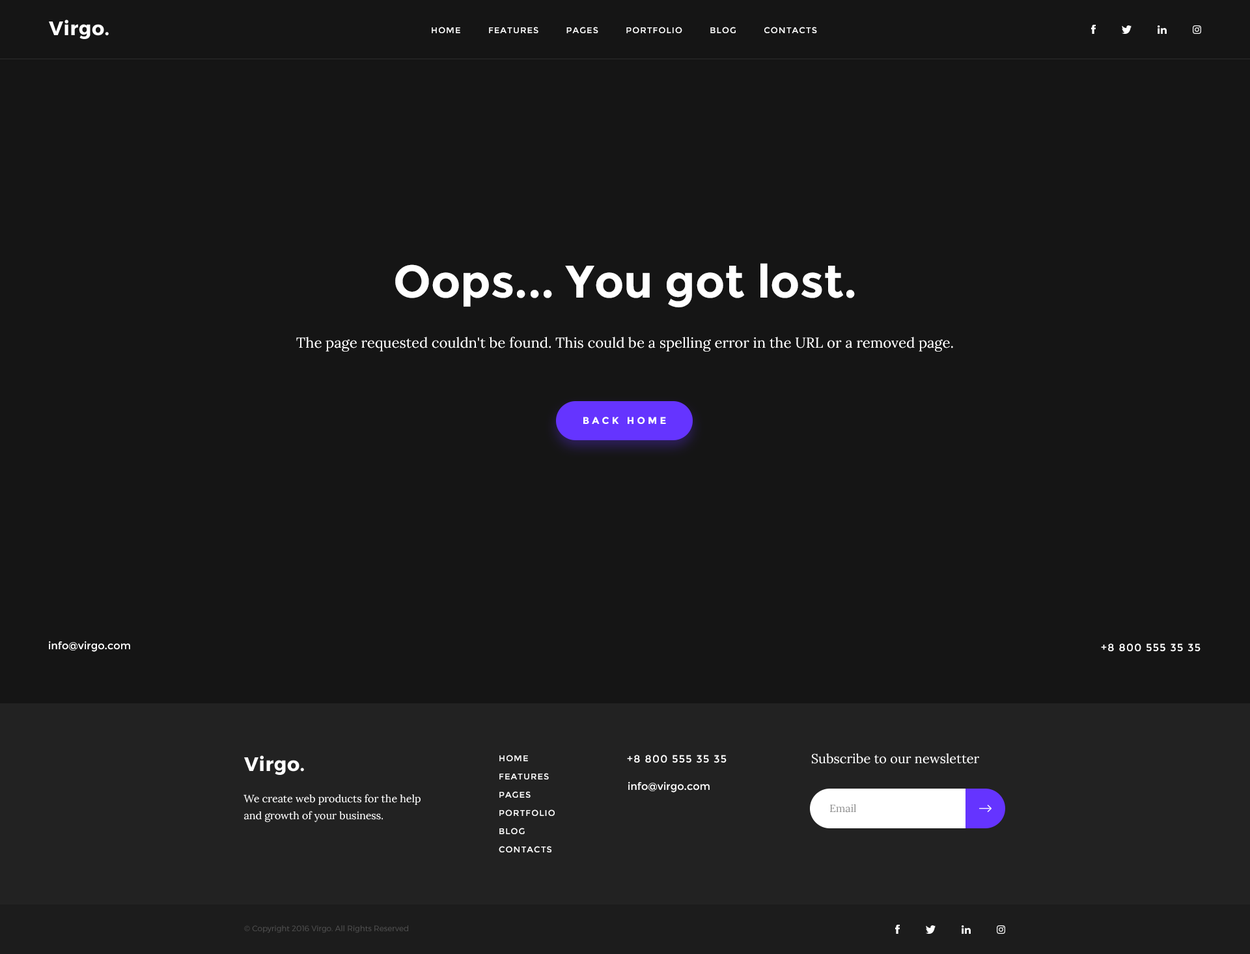
<style>
.page{position:relative;width:1250px;height:954px;background:#151515}
.page>*{position:absolute;margin:0}
.t1{font:8.5px "Montserrat-Regular";letter-spacing:0.08em;color:#ffffff;text-transform:uppercase}
.t2{font:45.8px "Montserrat-Bold";color:#ffffff}
.t3{font:14.4px "Lora-Regular";color:#ffffff}
.t4{font:9.8px "Montserrat-Bold";letter-spacing:0.28em;color:#ffffff;text-transform:uppercase}
.t5{font:10.4px "Montserrat-Regular";color:#ffffff}
.t6{font:10.4px "Montserrat-Regular";letter-spacing:0.08em;color:#ffffff;text-transform:uppercase}
.t7{font:8.5px/18.2px "Montserrat-Regular";letter-spacing:0.08em;color:#ffffff;text-transform:uppercase}
.t8{font:13px "Lora-Regular";color:#fefefe}
.t9{font:10.4px/16.9px "Lora-Regular";color:#fefefe}
.t10{font:10.4px "Lora-Regular";color:#8a8a8a}
.t11{font:7.8px "Montserrat-Light";color:#525252}
</style>
<div class="page">
<p class="t1" style="left:432px;top:27px;width:385px;height:6px">home         features         pages         portfolio         blog         contacts</p>
<p class="t2" style="left:395px;top:263px;width:460px;height:44px">Oops... You got lost.</p>
<p class="t3" style="left:296px;top:337px;width:657px;height:15px">The page requested couldn't be found. This could be a spelling error in the URL or a removed page.</p>
<p class="t4" style="left:583px;top:417px;width:83px;height:7px">back home</p>
<p class="t5" style="left:49px;top:641px;width:81px;height:11px">info@virgo.com</p>
<p class="t6" style="left:1101px;top:643px;width:100px;height:9px">+8 800 555 35 35</p>
<p class="t7" style="left:499px;top:755px;width:56px;height:97px">home<br>features<br>pages<br>portfolio<br>blog<br>contacts</p>
<p class="t6" style="left:627px;top:755px;width:100px;height:8px">+8 800 555 35 35</p>
<p class="t8" style="left:812px;top:753px;width:167px;height:11px">Subscribe to our newsletter</p>
<p class="t5" style="left:628px;top:781px;width:82px;height:11px">info@virgo.com</p>
<p class="t9" style="left:244px;top:794px;width:177px;height:28px">We create web products for the help and growth of your business.</p>
<p class="t10" style="left:830px;top:804px;width:26px;height:9px">Email</p>
<p class="t11" style="left:244px;top:925px;width:164px;height:8px">© Copyright 2016 Virgo. All Rights Reserved</p>
</div>
